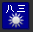
<style>
.page{position:relative;width:33px;height:32px;background:#000090}
.page>*{position:absolute;margin:0}
.t1{font:10.4px "SimSun";color:#ffffff}
</style>
<div class="page">
<p class="t1" style="left:6px;top:5px;width:19px;height:8px">八三</p>
</div>
